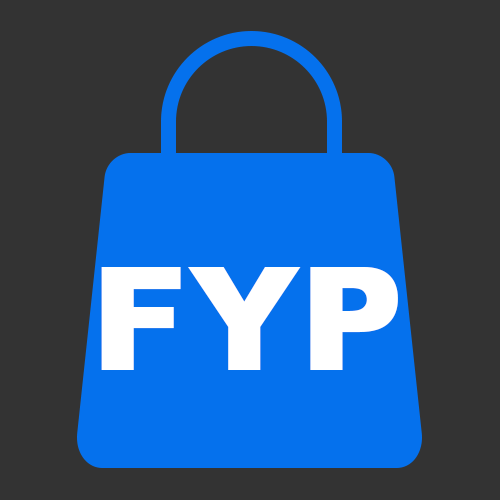
<style>
.page{position:relative;width:500px;height:500px;background:#333333}
.page>*{position:absolute;margin:0}
.t1{font:144.3px "Arial-Black";color:#ffffff}
</style>
<div class="page">
<p class="t1" style="left:101px;top:267px;width:297px;height:103px">FYP</p>
</div>
